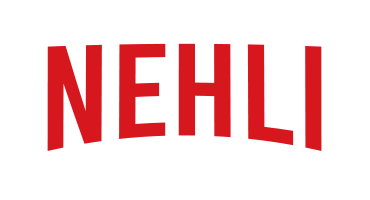
<style>
.page{position:relative;width:370px;height:200px;background:#ffffff}
.page>*{position:absolute;margin:0}
.t1{font:152px "Bebas-Regular";color:#d7171e}
</style>
<div class="page">
<p class="t1" style="left:47px;top:43px;width:275px;height:108px">NEHLI</p>
</div>
